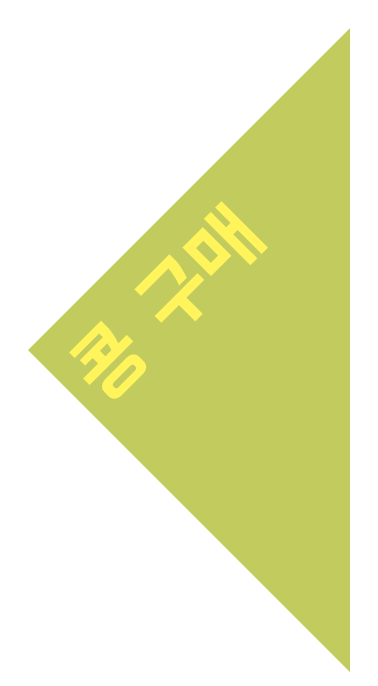
<style>
.page{position:relative;width:378px;height:686px;background:#ffffff}
.page>*{position:absolute;margin:0}
.t1{font:80.4px "BMHANNA11yrsold";color:#fff45c}
</style>
<div class="page">
<p class="t1" style="left:69px;top:201px;width:199px;height:198px;rotate:-45deg">콩 구매</p>
</div>
